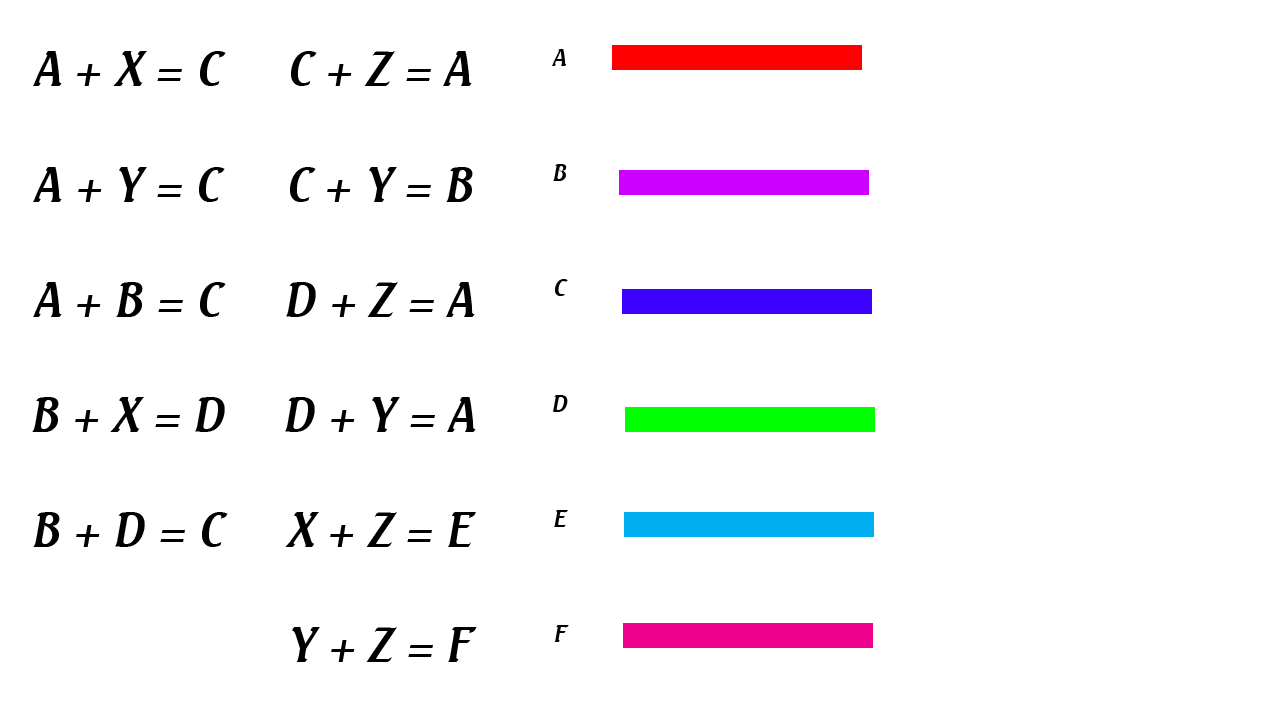
<style>
.page{position:relative;width:1280px;height:720px;background:#ffffff}
.page>*{position:absolute;margin:0}
.t1{font:48px "Seagull-Serial-RegularItalic";color:#000000}
.t2{font:24px "Seagull-Serial-RegularItalic";color:#000000}
</style>
<div class="page">
<p class="t1" style="left:32px;top:51px;width:196px;height:496px;text-align:center">A + X = C<br><br>A + Y = C<br><br>A + B = C<br><br>B + X = D<br><br>B + D = C</p>
<p class="t1" style="left:285px;top:51px;width:192px;height:611px;text-align:center">C + Z = A<br><br>C + Y = B<br><br>D + Z = A<br><br>D + Y = A<br><br>X + Z = E<br><br>Y + Z = F</p>
<p class="t2" style="left:552px;top:49px;width:17px;height:593px;text-align:center">A<br><br><br><br>B<br><br><br><br>C<br><br><br><br>D<br><br><br><br>E<br><br><br><br>F</p>
</div>
